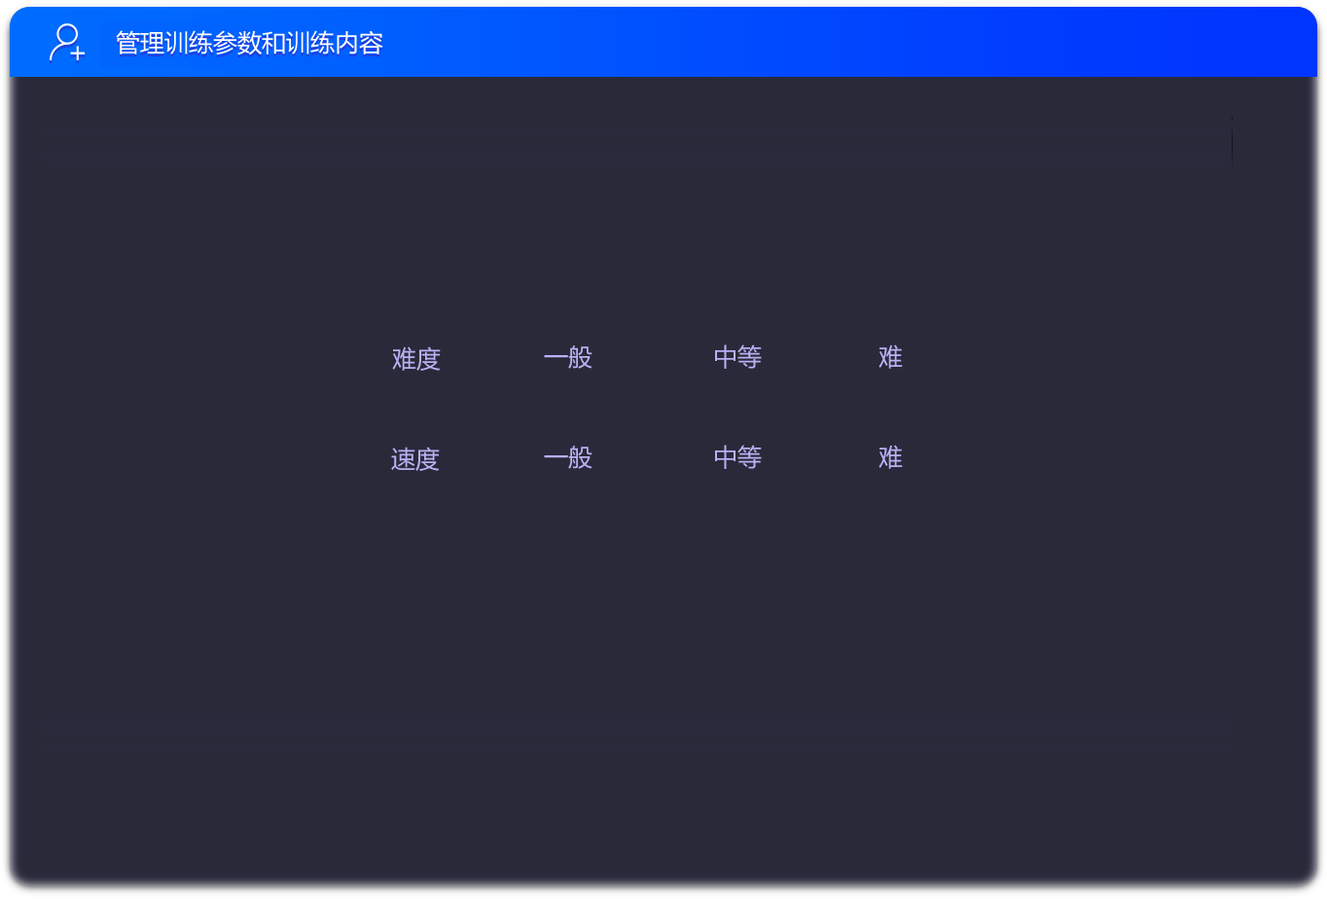
<style>
.page{position:relative;width:1327px;height:899px;background:#29293a}
.page>*{position:absolute;margin:0}
.t1{font:24.3px "MicrosoftYaHei";color:#ffffff}
.t2{font:24.3px "MicrosoftYaHei";color:#bab1f4}
</style>
<div class="page">
<p class="t1" style="left:116px;top:30px;width:267px;height:25px">管理训练参数和训练内容</p>
<p class="t2" style="left:392px;top:346px;width:49px;height:25px">难度</p>
<p class="t2" style="left:544px;top:345px;width:48px;height:24px">一般</p>
<p class="t2" style="left:715px;top:344px;width:47px;height:25px">中等</p>
<p class="t2" style="left:878px;top:344px;width:25px;height:25px">难</p>
<p class="t2" style="left:391px;top:446px;width:49px;height:25px">速度</p>
<p class="t2" style="left:544px;top:445px;width:48px;height:24px">一般</p>
<p class="t2" style="left:715px;top:445px;width:47px;height:24px">中等</p>
<p class="t2" style="left:878px;top:445px;width:25px;height:24px">难</p>
</div>
